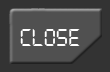
<style>
.page{position:relative;width:110px;height:72px;background:#505050}
.page>*{position:absolute;margin:0}
.t1{font:26px "DS-Digital";letter-spacing:-0.025em;color:#ffffff}
</style>
<div class="page">
<p class="t1" style="left:20px;top:29px;width:60px;height:17px">close</p>
</div>
